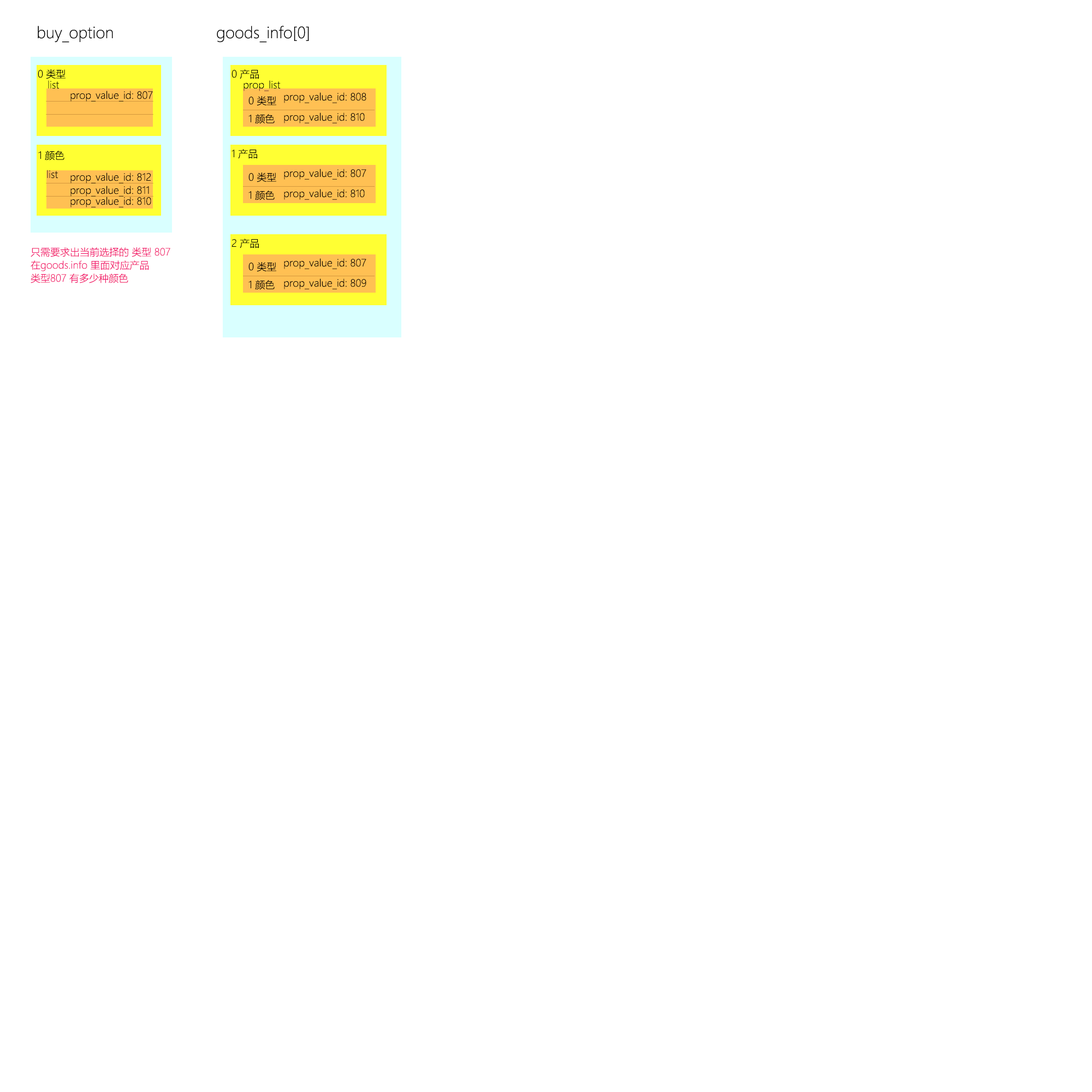
<style>
.page{position:relative;width:1092px;height:1092px;background:#ffffff}
.page>*{position:absolute;margin:0}
.t1{font:15.3px "MicrosoftYaHeiLight";color:#010101}
.t2{font:9.8px "MicrosoftYaHeiLight";color:#010101}
.t3{font:9.8px "MicrosoftYaHeiLight";color:#000000}
.t4{font:9.8px/13.1px "MicrosoftYaHeiLight";color:#f21769}
</style>
<div class="page">
<p class="t1" style="left:38px;top:26px;width:75px;height:17px">buy_option</p>
<p class="t1" style="left:217px;top:26px;width:92px;height:17px">goods_info[0]</p>
<p class="t2" style="left:38px;top:69px;width:28px;height:10px">0 类型</p>
<p class="t2" style="left:232px;top:69px;width:27px;height:10px">0 产品</p>
<p class="t3" style="left:48px;top:80px;width:11px;height:9px">list</p>
<p class="t3" style="left:244px;top:80px;width:37px;height:11px">prop_list</p>
<p class="t3" style="left:70px;top:91px;width:83px;height:11px">prop_value_id: 807</p>
<p class="t3" style="left:248px;top:96px;width:28px;height:10px">0 类型</p>
<p class="t3" style="left:284px;top:92px;width:82px;height:11px">prop_value_id: 808</p>
<p class="t3" style="left:284px;top:112px;width:81px;height:11px">prop_value_id: 810</p>
<p class="t3" style="left:248px;top:114px;width:27px;height:10px">1 颜色</p>
<p class="t2" style="left:232px;top:149px;width:25px;height:10px">1 产品</p>
<p class="t2" style="left:38px;top:151px;width:26px;height:10px">1 颜色</p>
<p class="t3" style="left:47px;top:170px;width:11px;height:9px">list</p>
<p class="t3" style="left:70px;top:173px;width:81px;height:10px">prop_value_id: 812</p>
<p class="t3" style="left:248px;top:173px;width:28px;height:9px">0 类型</p>
<p class="t3" style="left:284px;top:169px;width:82px;height:11px">prop_value_id: 807</p>
<p class="t3" style="left:70px;top:186px;width:79px;height:11px">prop_value_id: 811</p>
<p class="t3" style="left:70px;top:197px;width:81px;height:10px">prop_value_id: 810</p>
<p class="t3" style="left:248px;top:191px;width:27px;height:9px">1 颜色</p>
<p class="t3" style="left:284px;top:189px;width:81px;height:11px">prop_value_id: 810</p>
<p class="t2" style="left:232px;top:239px;width:27px;height:9px">2 产品</p>
<p class="t4" style="left:31px;top:247px;width:139px;height:36px">只需要求出当前选择的 类型 807   <br>在goods.info 里面对应产品 <br>类型807 有多少种颜色</p>
<p class="t3" style="left:248px;top:262px;width:28px;height:10px">0 类型</p>
<p class="t3" style="left:284px;top:258px;width:82px;height:11px">prop_value_id: 807</p>
<p class="t3" style="left:248px;top:280px;width:27px;height:10px">1 颜色</p>
<p class="t3" style="left:284px;top:278px;width:82px;height:11px">prop_value_id: 809</p>
</div>
